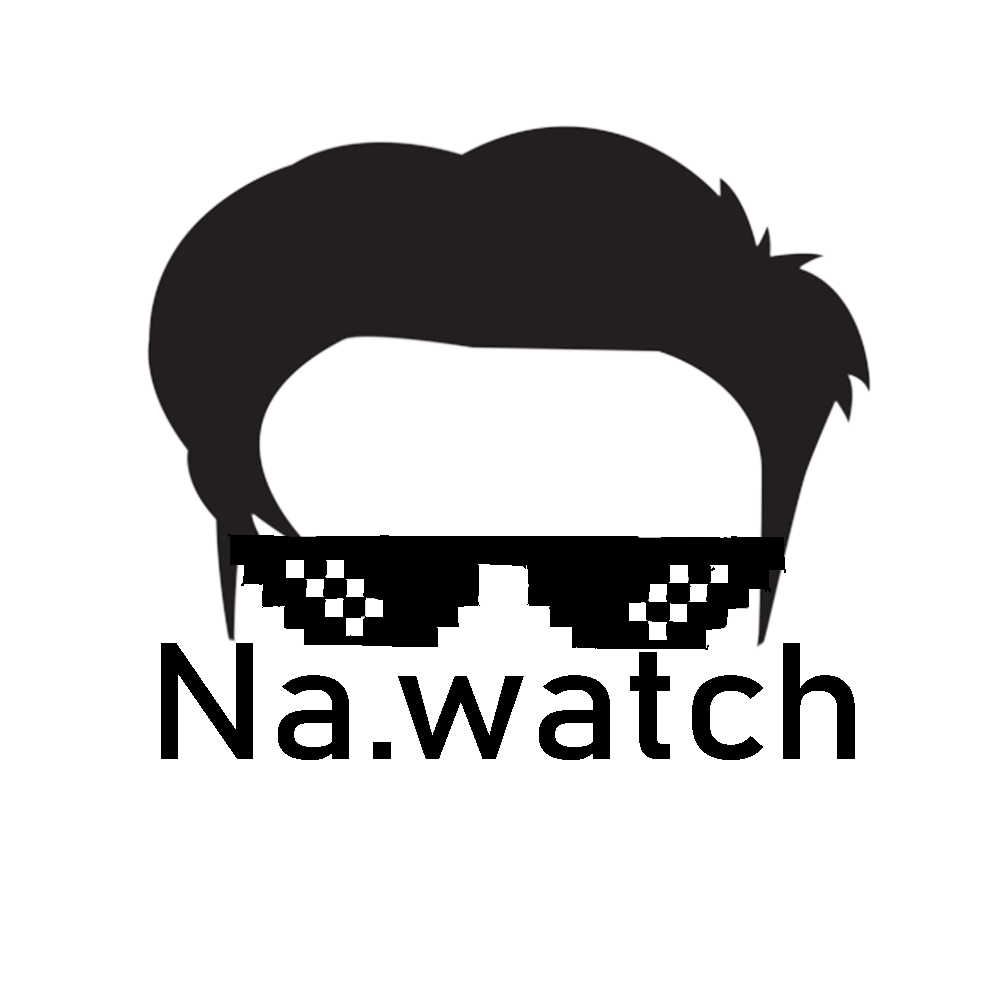
<style>
.page{position:relative;width:1000px;height:1000px;background:#ffffff}
.page>*{position:absolute;margin:0}
.t1{font:163px "Bahnschrift";color:#000000;scale:1.08 1}
</style>
<div class="page">
<p class="t1" style="left:161px;top:643px;width:694px;height:117px">Na.watch</p>
</div>
